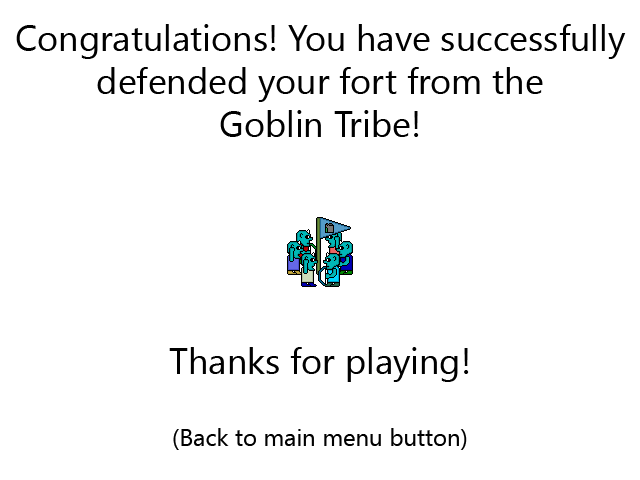
<style>
.page{position:relative;width:640px;height:480px;background:#ffffff}
.page>*{position:absolute;margin:0}
.t1{font:36px "SegoeUISymbol";color:#000000}
.t2{font:24px "SegoeUISymbol";color:#000000}
</style>
<div class="page">
<p class="t1" style="left:16px;top:24px;width:610px;height:113px;text-align:center">Congratulations! You have successfully defended your fort from the<br>Goblin Tribe!</p>
<p class="t2" style="left:169px;top:347px;width:300px;height:103px;text-align:center"><span class="t1">Thanks for playing!<br><br></span>(Back to main menu button)</p>
</div>
